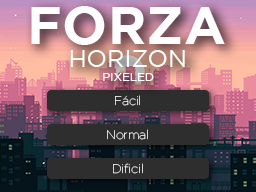
<style>
.page{position:relative;width:256px;height:192px}
.page>*{position:absolute;margin:0}
.t1{font:53.3px "Gotham-Bold";color:#ffffff}
.t2{font:24.2px "Gotham-Book";color:#ffffff}
.t3{font:11.7px "Gotham-Book";color:#ffffff}
</style>
<div class="page">
<p class="t1" style="left:31px;top:6px;width:194px;height:39px">FORZA</p>
<p class="t1" style="left:26px;top:54px;width:194px;height:39px">FORZA</p>
<p class="t2" style="left:70px;top:50px;width:115px;height:17px">HORIZON</p>
<p class="t3" style="left:103px;top:73px;width:51px;height:8px">PIXELED</p>
</div>
